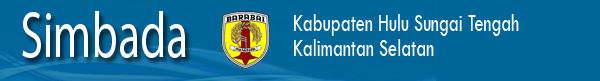
<style>
.page{position:relative;width:600px;height:81px;background:#006699}
.page>*{position:absolute;margin:0}
.t1{font:65.3px "MyriadPro-Regular";color:#ffffff;scale:0.7 1}
.t2{font:25.8px "TwCenMT-Regular";color:#ffffff;scale:0.71 1}
</style>
<div class="page">
<p class="t1" style="left:22px;top:11px;width:164px;height:47px">Simbada</p>
<p class="t2" style="left:294px;top:14px;width:225px;height:22px">Kabupaten Hulu Sungai Tengah</p>
<p class="t2" style="left:294px;top:39px;width:140px;height:17px">Kalimantan Selatan</p>
</div>
